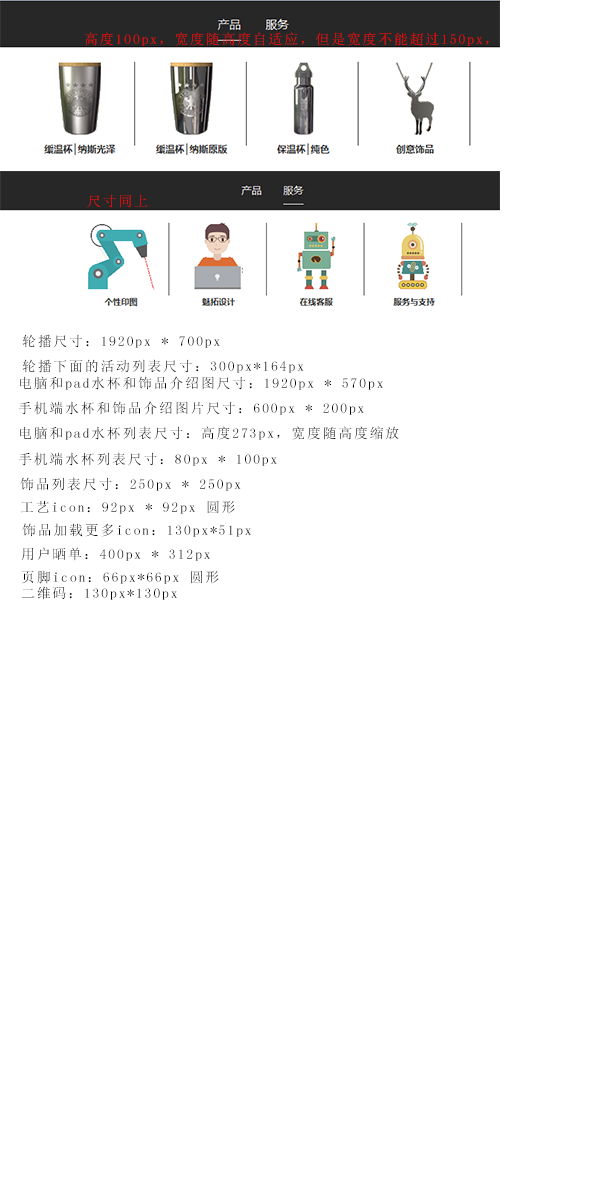
<style>
.page{position:relative;width:600px;height:1200px;background:#ffffff}
.page>*{position:absolute;margin:0}
.t1{font:14px "SimSun";letter-spacing:0.12em;color:#f50505}
.t2{font:14px "SimSun";letter-spacing:0.12em;color:#040404}
.t3{font:14px "SimSun";letter-spacing:0.12em;color:#060606}
.t4{font:14px "SimSun";letter-spacing:0.12em;color:#050505}
.t5{font:14px "SimSun";letter-spacing:0.12em;color:#020202}
.t6{font:14px "SimSun";letter-spacing:0.12em;color:#030303}
.t7{font:14px "SimSun";letter-spacing:0.12em;color:#070707}
</style>
<div class="page">
<p class="t1" style="left:85px;top:32px;width:404px;height:14px">高度100px，宽度随高度自适应，但是宽度不能超过150px，</p>
<p class="t1" style="left:87px;top:194px;width:61px;height:14px">尺寸同上</p>
<p class="t2" style="left:22px;top:334px;width:198px;height:14px">轮播尺寸：1920px * 700px</p>
<p class="t3" style="left:22px;top:359px;width:282px;height:14px">轮播下面的活动列表尺寸：300px*164px</p>
<p class="t4" style="left:20px;top:376px;width:363px;height:14px">电脑和pad水杯和饰品介绍图尺寸：1920px * 570px</p>
<p class="t3" style="left:18px;top:401px;width:346px;height:14px">手机端水杯和饰品介绍图片尺寸：600px * 200px</p>
<p class="t5" style="left:20px;top:426px;width:379px;height:14px">电脑和pad水杯列表尺寸：高度273px，宽度随高度缩放</p>
<p class="t2" style="left:18px;top:452px;width:259px;height:14px">手机端水杯列表尺寸：80px * 100px</p>
<p class="t6" style="left:20px;top:477px;width:221px;height:14px">饰品列表尺寸：250px * 250px</p>
<p class="t7" style="left:20px;top:500px;width:215px;height:14px">工艺icon：92px * 92px 圆形</p>
<p class="t6" style="left:22px;top:523px;width:229px;height:14px">饰品加载更多icon：130px*51px</p>
<p class="t3" style="left:21px;top:547px;width:189px;height:14px">用户晒单：400px * 312px</p>
<p class="t5" style="left:22px;top:570px;width:197px;height:14px">页脚icon：66px*66px 圆形</p>
<p class="t5" style="left:21px;top:586px;width:156px;height:14px">二维码：130px*130px</p>
</div>
